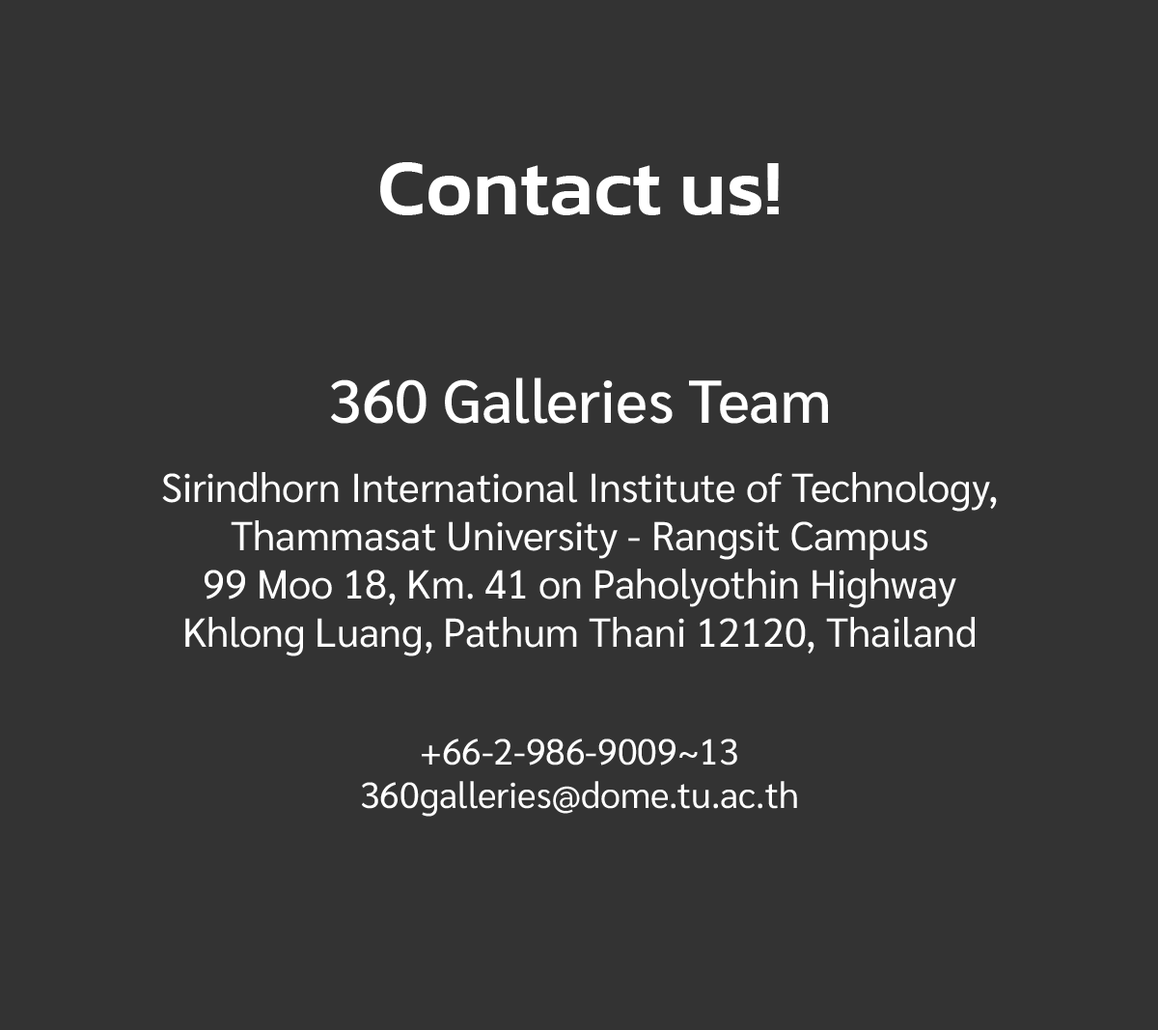
<style>
.page{position:relative;width:1158px;height:1030px;background:#333333}
.page>*{position:absolute;margin:0}
.t1{font:80.4px "Kanit-Medium";color:#ffffff}
.t2{font:60.3px "Sarabun-Medium";color:#ffffff}
.t3{font:40.2px "Sarabun-Regular";color:#ffffff}
.t4{font:36.2px "Sarabun-Regular";color:#ffffff}
</style>
<div class="page">
<p class="t1" style="left:380px;top:162px;width:399px;height:53px">Contact us!</p>
<p class="t2" style="left:331px;top:377px;width:497px;height:47px">360 Galleries Team</p>
<p class="t3" style="left:162px;top:472px;width:835px;height:184px;text-align:center">Sirindhorn International Institute of Technology,<br>Thammasat University - Rangsit Campus<br>99 Moo 18, Km. 41 on Paholyothin Highway<br>Khlong Luang, Pathum Thani 12120, Thailand</p>
<p class="t4" style="left:362px;top:738px;width:435px;height:78px;text-align:center">+66-2-986-9009~13<br>360galleries@dome.tu.ac.th</p>
</div>
